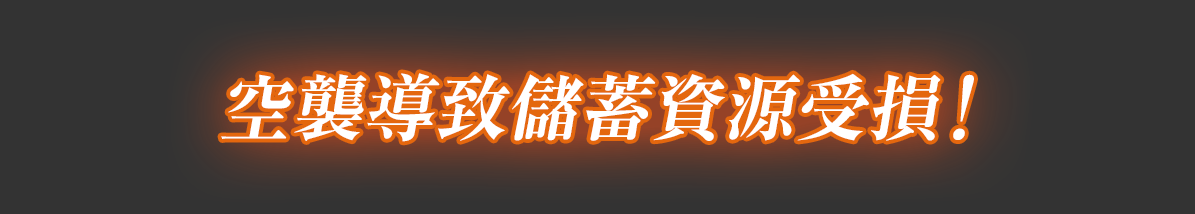
<style>
.page{position:relative;width:1195px;height:214px;background:#333333}
.page>*{position:absolute;margin:0}
.t1{font:72px "RyuminPr6N-ExBold";color:#ffffff;font-style:italic}
.t2{font:86px "DFKaiShu-SB-Estd-BF";color:#ffffff;font-style:italic}
</style>
<div class="page">
<p class="t1" style="left:221px;top:73px;width:753px;height:69px">空襲導致儲蓄資源受損<span class="t2">!</span></p>
</div>
